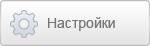
<style>
.page{position:relative;width:150px;height:46px}
.page>*{position:absolute;margin:0}
.t1{font:14px "ArialMT";color:#777777}
</style>
<div class="page">
<p class="t1" style="left:48px;top:17px;width:67px;height:14px">Настройки</p>
</div>
